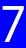
<style>
.page{position:relative;width:26px;height:48px;background:#0000ff}
.page>*{position:absolute;margin:0}
.t1{font:47.6px "KozGoPr6N-Regular";color:#ffffff}
</style>
<div class="page">
<p class="t1" style="left:2px;top:6px;width:22px;height:36px">7</p>
</div>
